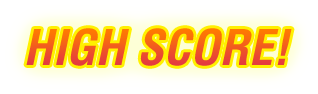
<style>
.page{position:relative;width:318px;height:94px}
.page>*{position:absolute;margin:0}
.t1{font:48px "Helvetica-Condensed-BoldObl"}
</style>
<div class="page">
<p class="t1" style="left:26px;top:28px;width:266px;height:38px">HIGH SCORE!</p>
</div>
